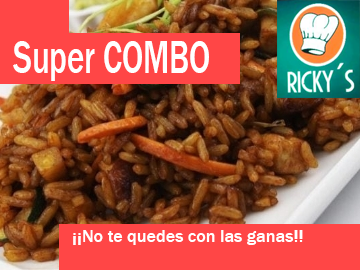
<style>
.page{position:relative;width:360px;height:270px;background:#ff4646}
.page>*{position:absolute;margin:0}
.t1{font:47.3px "FranklinGothic-Medium";color:#ffffff;scale:0.69 1}
.t2{font:18px "FranklinGothic-Medium";color:#ffffff}
</style>
<div class="page">
<p class="t1" style="left:13px;top:41px;width:196px;height:40px">Super COMBO</p>
<p class="t2" style="left:73px;top:230px;width:230px;height:15px">¡¡No te quedes con las ganas!!</p>
</div>
